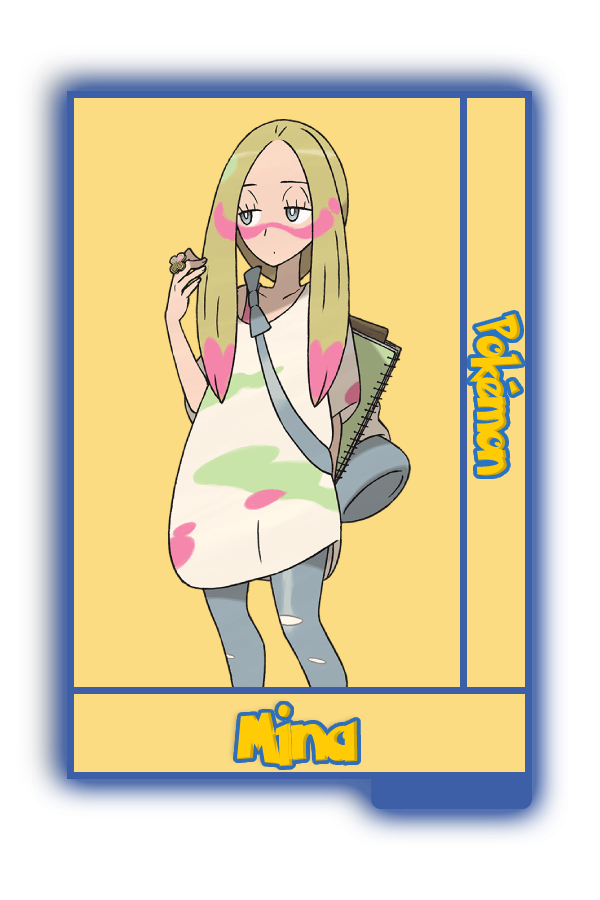
<style>
.page{position:relative;width:600px;height:900px;background:#fbdc83}
.page>*{position:absolute;margin:0}
.t1{font:48.8px "PokemonSolidNormal";color:#ffcb05;scale:0.8 1}
.t2{font:60.1px "PokemonSolidNormal";color:#ffcb05;scale:0.96 1}
</style>
<div class="page">
<p class="t1" style="left:469px;top:313px;width:54px;height:163px;rotate:90deg">Pokémon</p>
<p class="t2" style="left:236px;top:704px;width:122px;height:63px">Mina</p>
</div>
